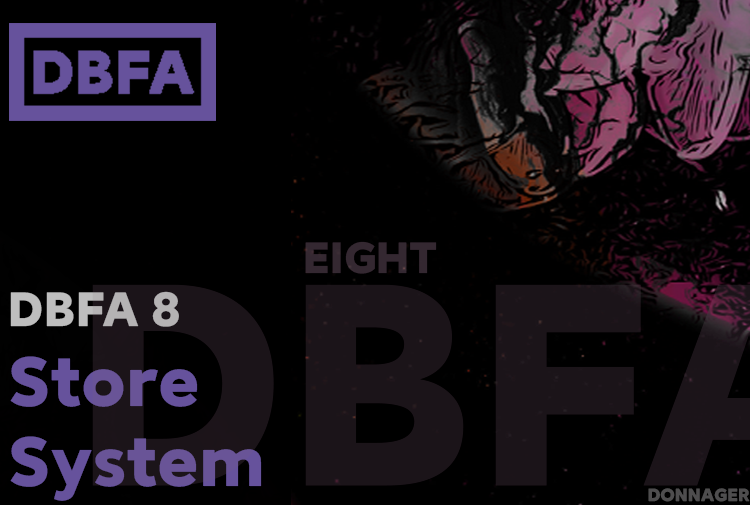
<style>
.page{position:relative;width:750px;height:505px;background:#000000}
.page>*{position:absolute;margin:0}
.t1{font:41.7px "MILanProVF-Heavy";color:#342831}
.t2{font:66.7px "MILanProVF-Heavy";color:#66529c}
.t3{font:45.8px "MILanProVF-Heavy";color:#bebebe}
.t4{font:16.7px "MILanProVF-Heavy";color:#4e4d4e}
</style>
<div class="page">
<p class="t1" style="left:305px;top:241px;width:132px;height:33px">EIGHT</p>
<p class="t2" style="left:10px;top:291px;width:252px;height:210px"><span class="t3">DBFA 8<br></span>Store<br>System</p>
<p class="t4" style="left:648px;top:488px;width:102px;height:14px">DONNAGER</p>
</div>
